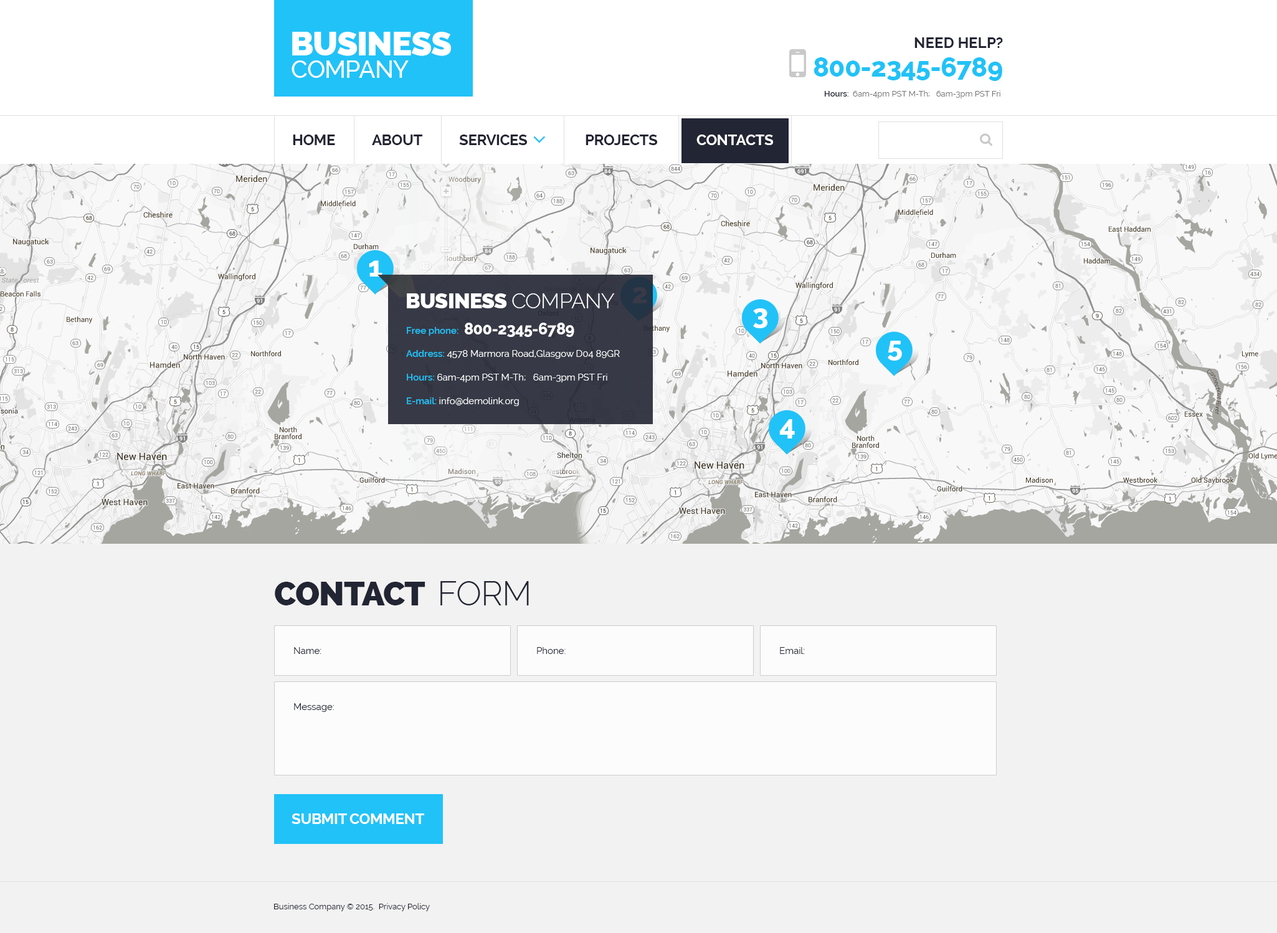
<style>
.page{position:relative;width:1277px;height:933px;background:#f2f2f2}
.page>*{position:absolute;margin:0}
.t1{font:33.6px "Raleway-Heavy";letter-spacing:-0.02em;color:#ffffff;text-transform:uppercase}
.t2{font:15px "Raleway-Bold";color:#222533;text-transform:uppercase}
.t3{font:24.3px "Raleway-Medium";letter-spacing:-0.02em;color:#ffffff;text-transform:uppercase}
.t4{font:26.8px "Raleway-ExtraBold";letter-spacing:-0.02em;color:#21c2f8;text-transform:uppercase}
.t5{font:8.1px "Raleway";color:#777777}
.t6{font:8.1px "Raleway-SemiBold";color:#222533}
.t7{font:15px "Raleway-Bold";letter-spacing:-0.02em;color:#222533;text-transform:uppercase}
.t8{font:15px "Raleway-Bold";letter-spacing:-0.02em;color:#ffffff;text-transform:uppercase}
.t9{font:28px "Raleway-ExtraBold";color:#ffffff}
.t10{font:21.2px "Raleway-Heavy";letter-spacing:-0.02em;color:#ffffff;text-transform:uppercase}
.t11{font:21.2px "Raleway-Light";letter-spacing:-0.02em;color:#ffffff;text-transform:uppercase}
.t12{font:28px "Raleway-ExtraBold";color:#383a47}
.t13{font:9.3px "Raleway-SemiBold";color:#21c2f8}
.t14{font:15.6px "Raleway-ExtraBold";letter-spacing:-0.02em;color:#ffffff;text-transform:uppercase}
.t15{font:9.3px/23.7px "Raleway";color:#ffffff}
.t16{font:9.3px/23.7px "Raleway-SemiBold";color:#21c2f8}
.t17{font:33.6px "Raleway-Heavy";letter-spacing:-0.02em;color:#222533;text-transform:uppercase}
.t18{font:33.6px "Raleway-Light";letter-spacing:-0.02em;color:#222533;text-transform:uppercase}
.t19{font:9.3px "Raleway";color:#222533}
.t20{font:8.1px "Raleway";color:#222533}
</style>
<div class="page">
<p class="t1" style="left:292px;top:32px;width:159px;height:24px">business</p>
<p class="t2" style="left:915px;top:37px;width:88px;height:11px">Need help?</p>
<p class="t3" style="left:292px;top:60px;width:117px;height:18px">company</p>
<p class="t4" style="left:814px;top:57px;width:189px;height:24px">800-2345-6789</p>
<p class="t5" style="left:824px;top:90px;width:177px;height:8px"><span class="t6">Hours:  </span>6am-4pm PST M-Th;   6am-3pm PST Fri</p>
<p class="t7" style="left:293px;top:135px;width:42px;height:10px">hOME</p>
<p class="t7" style="left:372px;top:135px;width:50px;height:10px">aBOUT</p>
<p class="t7" style="left:459px;top:135px;width:68px;height:10px">sERVICES</p>
<p class="t7" style="left:586px;top:135px;width:71px;height:10px">PROjects</p>
<p class="t8" style="left:697px;top:135px;width:76px;height:10px">CONTACTS</p>
<p class="t9" style="left:369px;top:260px;width:14px;height:17px">1</p>
<p class="t10" style="left:407px;top:293px;width:208px;height:15px">business <span class="t11">company</span></p>
<p class="t12" style="left:632px;top:287px;width:15px;height:16px">2</p>
<p class="t9" style="left:753px;top:308px;width:15px;height:20px">3</p>
<p class="t13" style="left:407px;top:327px;width:52px;height:9px">Free phone:</p>
<p class="t14" style="left:465px;top:323px;width:110px;height:14px">800-2345-6789</p>
<p class="t9" style="left:888px;top:341px;width:14px;height:20px">5</p>
<p class="t15" style="left:406px;top:350px;width:214px;height:56px"><span class="t16">Address: </span>4578 Marmora Road,Glasgow D04 89GR<br><span class="t16">Hours: </span>6am-4pm PST M-Th;   6am-3pm PST Fri<br><span class="t16">E-mail: </span>info@demolink.org</p>
<p class="t9" style="left:780px;top:419px;width:15px;height:20px">4</p>
<p class="t17" style="left:275px;top:581px;width:254px;height:25px">contact  <span class="t18">form</span></p>
<p class="t19" style="left:294px;top:647px;width:28px;height:7px">Name:</p>
<p class="t19" style="left:537px;top:647px;width:29px;height:7px">Phone:</p>
<p class="t19" style="left:780px;top:647px;width:25px;height:7px">Email:</p>
<p class="t19" style="left:294px;top:704px;width:40px;height:8px">Message:</p>
<p class="t8" style="left:292px;top:814px;width:132px;height:10px">Submit comment</p>
<p class="t20" style="left:274px;top:904px;width:156px;height:8px">Business Company © 2015.  Privacy Policy</p>
</div>
